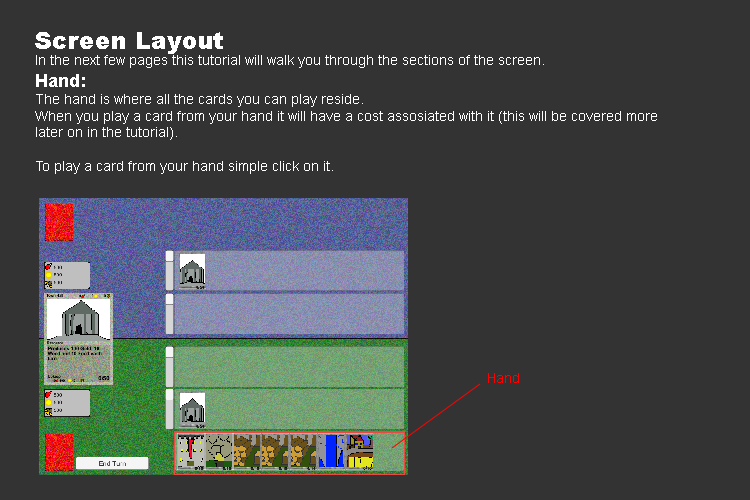
<style>
.page{position:relative;width:750px;height:500px;background:#333333}
.page>*{position:absolute;margin:0}
.t1{font:14px "ArialMT";color:#ffffff}
.t2{font:24px "Arial-Black";color:#ffffff}
.t3{font:18px "Arial-BoldMT";color:#ffffff}
.t4{font:14px "ArialMT";color:#ff0000}
</style>
<div class="page">
<p class="t1" style="left:35px;top:32px;width:622px;height:142px"><span class="t2">Screen Layout<br></span>In the next few pages this tutorial will walk you through the sections of the screen.<br><span class="t3">Hand:<br></span>The hand is where all the cards you can play reside.<br>When you play a card from your hand it will have a cost assosiated with it (this will be covered more<br>later on in the tutorial).<br><br>To play a card from your hand simple click on it.</p>
<p class="t4" style="left:488px;top:373px;width:31px;height:10px">Hand</p>
</div>
